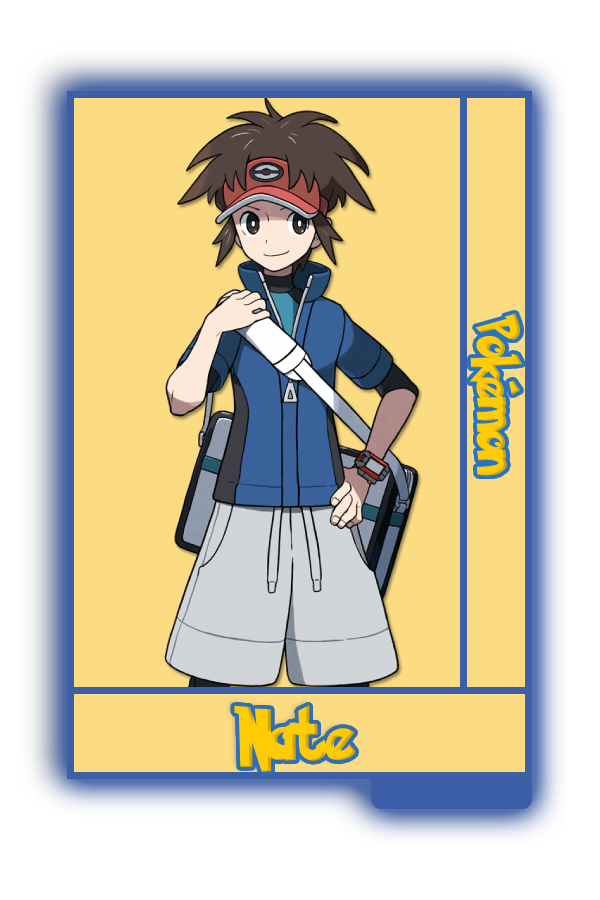
<style>
.page{position:relative;width:600px;height:900px;background:#fbdc83}
.page>*{position:absolute;margin:0}
.t1{font:48.8px "PokemonSolidNormal";color:#ffcb05;scale:0.8 1}
.t2{font:56.6px "PokemonSolidNormal";color:#ffcb05;scale:0.92 1}
</style>
<div class="page">
<p class="t1" style="left:469px;top:313px;width:54px;height:163px;rotate:90deg">Pokémon</p>
<p class="t2" style="left:234px;top:705px;width:122px;height:67px">Nate</p>
</div>
